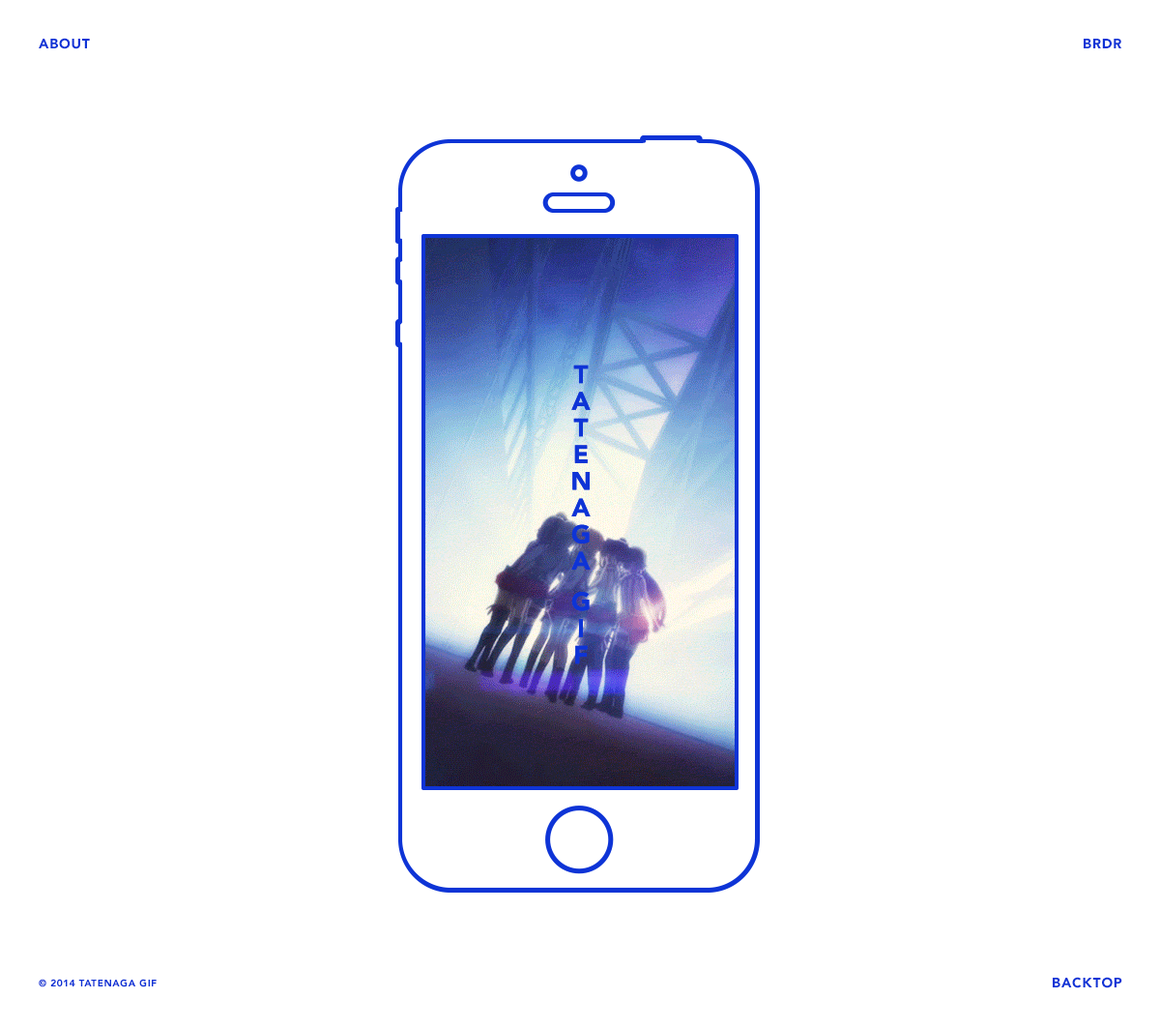
<style>
.page{position:relative;width:1160px;height:1028px;background:#ffffff}
.page>*{position:absolute;margin:0}
.t1{font:13.5px "Avenir-Black";letter-spacing:0.06em;color:#0e34d6}
.t2{font:25.1px/19.3px "Avenir-Black";letter-spacing:0.06em;color:#0e34d6}
.t3{font:9.7px "Avenir-Black";letter-spacing:0.06em;color:#0e34d6;text-transform:uppercase}
</style>
<div class="page">
<p class="t1" style="left:39px;top:38px;width:51px;height:11px">ABOUT</p>
<p class="t1" style="left:1084px;top:39px;width:39px;height:9px">BRDR</p>
<p class="t2" style="left:571px;top:365px;width:20px;height:299px;text-align:center">TATENAGA GIF</p>
<p class="t1" style="left:1053px;top:977px;width:70px;height:11px">BACKTOP</p>
<p class="t3" style="left:39px;top:978px;width:118px;height:9px">© 2014 TATENAGA GIF</p>
</div>
